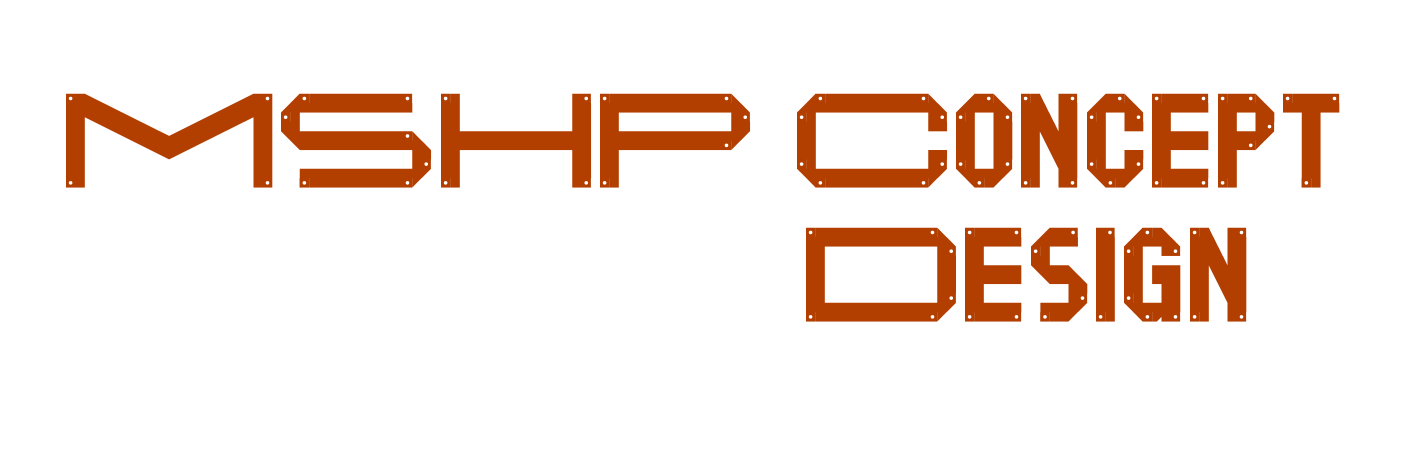
<style>
.page{position:relative;width:1417px;height:473px;background:#ffffff}
.page>*{position:absolute;margin:0}
.t1{font:150px "Motorless-Drilled";color:#b23e00}
</style>
<div class="page">
<p class="t1" style="left:66px;top:93px;width:1274px;height:95px">MSHP Concept</p>
<p class="t1" style="left:806px;top:227px;width:441px;height:95px">Design</p>
</div>
